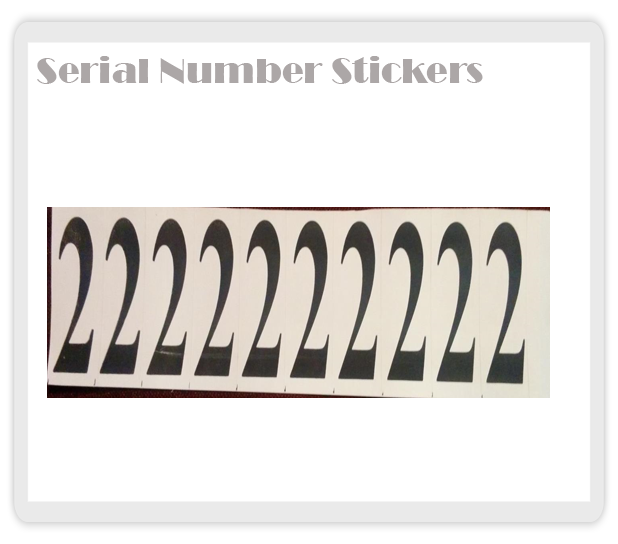
<style>
.page{position:relative;width:618px;height:544px;background:#ffffff}
.page>*{position:absolute;margin:0}
.t1{font:36px "Broadway";color:#aca7a7}
</style>
<div class="page">
<p class="t1" style="left:37px;top:56px;width:446px;height:28px">Serial Number Stickers</p>
</div>
